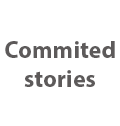
<style>
.page{position:relative;width:120px;height:126px;background:#ffffff}
.page>*{position:absolute;margin:0}
.t1{font:24px "MyriadPro-Bold";color:#5d5a5a}
</style>
<div class="page">
<p class="t1" style="left:5px;top:41px;width:110px;height:46px;text-align:center">Commited stories</p>
</div>
